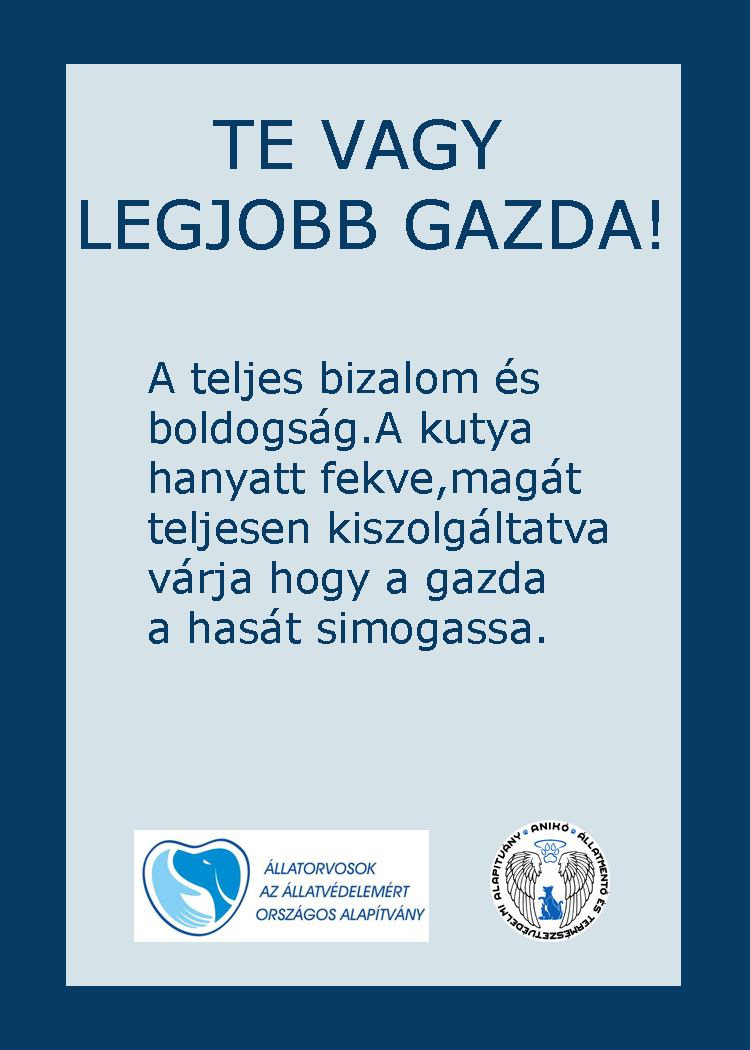
<style>
.page{position:relative;width:750px;height:1050px;background:#d5e2e7}
.page>*{position:absolute;margin:0}
.t1{font:41.7px "Verdana";color:#053b65}
</style>
<div class="page">
<p class="t1" style="left:148px;top:358px;width:459px;height:293px">A teljes bizalom és <br>boldogság.A kutya <br>hanyatt fekve,magát<br>teljesen kiszolgáltatva<br>várja hogy a gazda<br>a hasát simogassa.</p>
</div>
